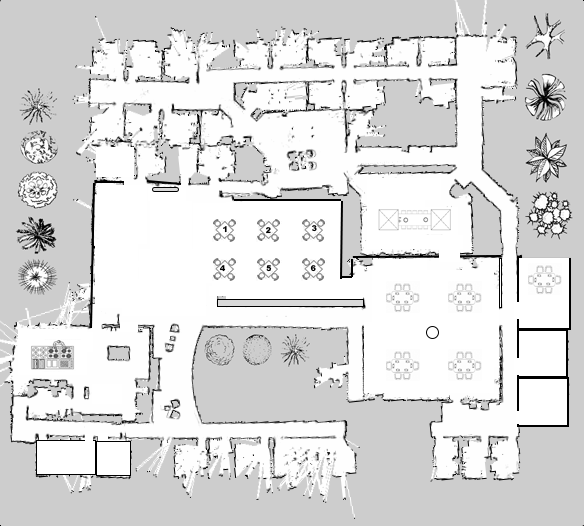
<style>
.page{position:relative;width:584px;height:526px;background:#cdcdcd}
.page>*{position:absolute;margin:0}
.t1{font:8px "Arial-Black";color:#020202}
</style>
<div class="page">
<p class="t1" style="left:223px;top:226px;width:4px;height:7px">1</p>
<p class="t1" style="left:266px;top:227px;width:5px;height:7px">2</p>
<p class="t1" style="left:312px;top:225px;width:5px;height:7px">3</p>
<p class="t1" style="left:219px;top:265px;width:7px;height:7px">4</p>
<p class="t1" style="left:266px;top:265px;width:6px;height:7px">5</p>
<p class="t1" style="left:310px;top:265px;width:6px;height:7px">6</p>
</div>
